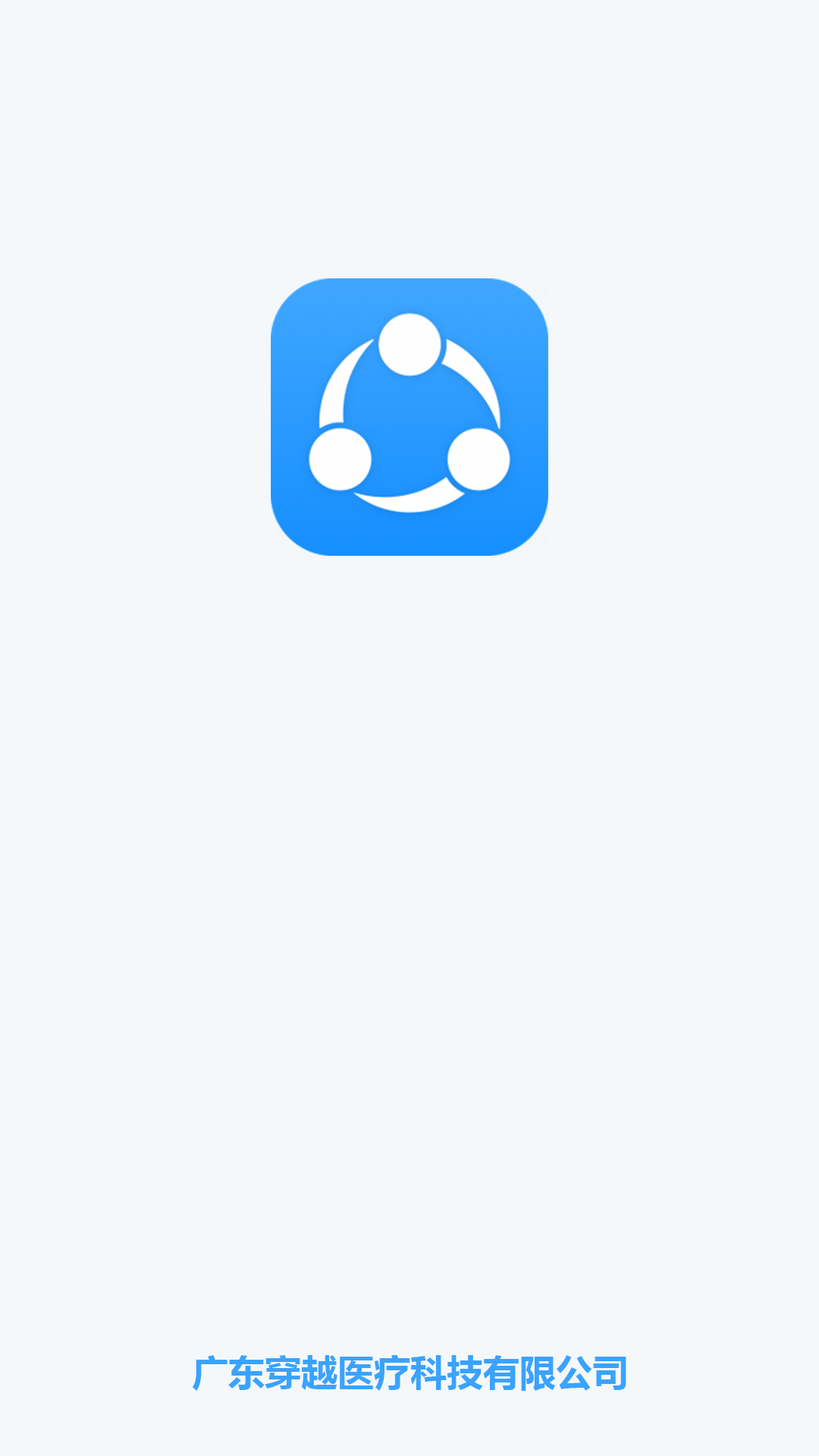
<style>
.page{position:relative;width:819px;height:1456px;background:#f5f8fa}
.page>*{position:absolute;margin:0}
.t1{font:36.4px "MicrosoftYaHei-Bold";color:#3aa3ff}
</style>
<div class="page">
<p class="t1" style="left:192px;top:1355px;width:434px;height:36px">广东穿越医疗科技有限公司</p>
</div>
